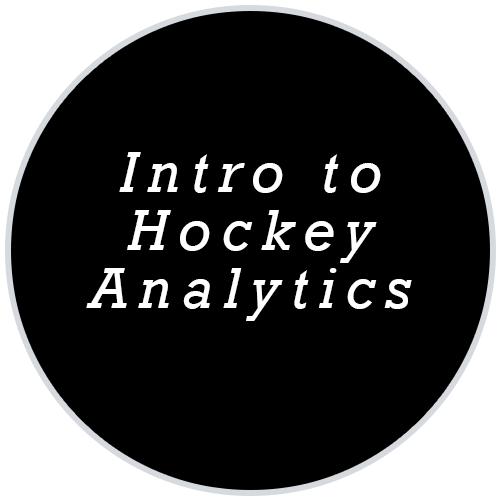
<style>
.page{position:relative;width:500px;height:500px;background:#000000}
.page>*{position:absolute;margin:0}
.t1{font:59.1px/58px "Rockwell-Italic";letter-spacing:0.18em;color:#ffffff}
</style>
<div class="page">
<p class="t1" style="left:86px;top:152px;width:326px;height:169px;text-align:center">Intro to Hockey<br>Analytics</p>
</div>
